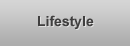
<style>
.page{position:relative;width:130px;height:46px}
.page>*{position:absolute;margin:0}
.t1{font:14px "Arial-BoldMT";color:#403f3f}
</style>
<div class="page">
<p class="t1" style="left:38px;top:15px;width:56px;height:14px">Lifestyle</p>
</div>
